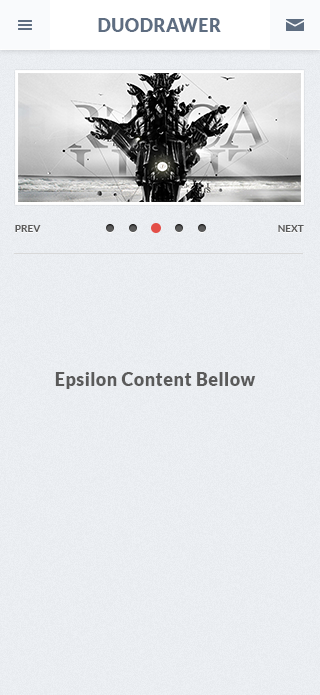
<style>
.page{position:relative;width:320px;height:695px}
.page>*{position:absolute;margin:0}
.t1{font:18px "Lato-Black";letter-spacing:0.025em;color:#5e6d81}
.t2{font:10px "Lato-Bold";color:#5a5a5a}
.t3{font:18px "Lato-Black";letter-spacing:0.025em;color:#5a5a5a}
</style>
<div class="page">
<p class="t1" style="left:98px;top:18px;width:123px;height:14px">DUODRAWER</p>
<p class="t2" style="left:15px;top:225px;width:26px;height:7px">PREV</p>
<p class="t2" style="left:278px;top:225px;width:26px;height:7px">NEXT</p>
<p class="t3" style="left:55px;top:372px;width:201px;height:17px">Epsilon Content Bellow</p>
</div>
